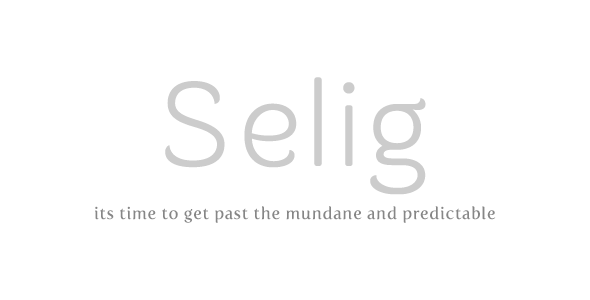
<style>
.page{position:relative;width:590px;height:300px;background:#ffffff}
.page>*{position:absolute;margin:0}
.t1{font:125px "Merge";letter-spacing:0.04em;color:#cccccc}
.t2{font:16.7px "FertigoPro-Regular";letter-spacing:0.04em;color:#868686}
</style>
<div class="page">
<p class="t1" style="left:165px;top:77px;width:261px;height:118px">Selig</p>
<p class="t2" style="left:95px;top:206px;width:401px;height:17px">its time to get past the mundane and predictable</p>
</div>
